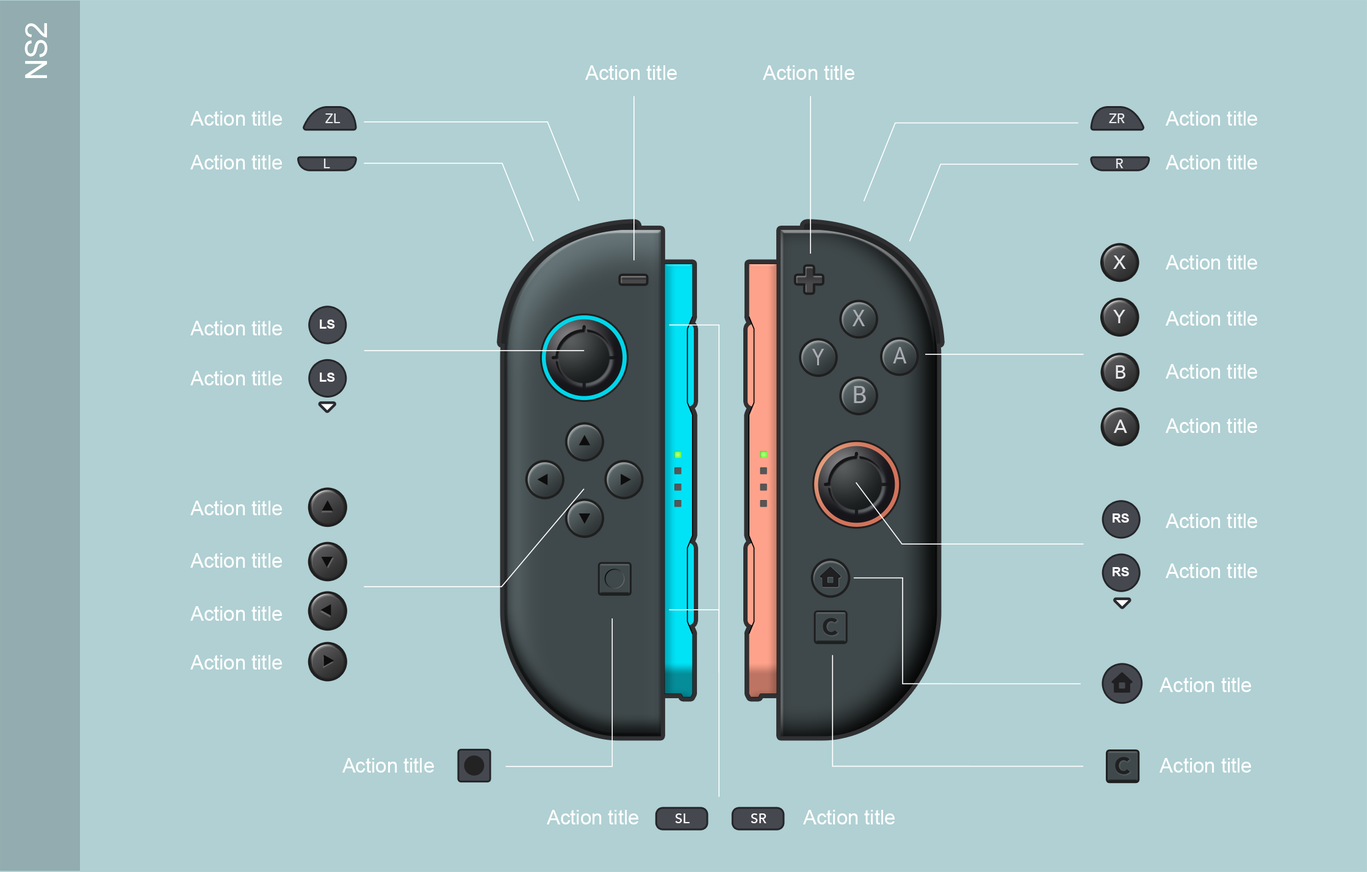
<style>
.page{position:relative;width:1367px;height:872px;background:#b0d0d3}
.page>*{position:absolute;margin:0}
.t1{font:30.5px "ArialMT";color:#ffffff}
.t2{font:20px "ArialMT";color:#ffffff}
.t3{font:13.3px "Avenir-Medium";color:#e7e9eb}
.t4{font:18.9px "Avenir-Medium";color:#e7e9eb}
.t5{font:22.8px "Avenir-Medium";color:#aaadb3;scale:0.83 1}
.t6{font:12.8px "Arial-BoldMT";color:#ffffff}
.t7{font:22.8px "Avenir-Medium";color:#aaadb3;scale:1.04 1}
.t8{font:23.3px "Avenir-Black";letter-spacing:0.01em;color:#202022}
.t9{font:13.6px "Avenir-Medium";color:#ffffff}
</style>
<div class="page">
<p class="t1" style="left:24px;top:23px;width:24px;height:55px;rotate:-90deg">NS2</p>
<p class="t2" style="left:585px;top:65px;width:92px;height:15px">Action title</p>
<p class="t2" style="left:763px;top:65px;width:91px;height:15px">Action title</p>
<p class="t2" style="left:190px;top:111px;width:92px;height:15px">Action title</p>
<p class="t3" style="left:325px;top:113px;width:15px;height:10px">ZL</p>
<p class="t3" style="left:1109px;top:113px;width:15px;height:10px">ZR</p>
<p class="t2" style="left:1165px;top:111px;width:92px;height:15px">Action title</p>
<p class="t2" style="left:190px;top:155px;width:92px;height:15px">Action title</p>
<p class="t3" style="left:323px;top:159px;width:7px;height:9px">L</p>
<p class="t3" style="left:1116px;top:159px;width:7px;height:9px">R</p>
<p class="t2" style="left:1165px;top:155px;width:92px;height:15px">Action title</p>
<p class="t4" style="left:1113px;top:256px;width:13px;height:13px">X</p>
<p class="t2" style="left:1165px;top:255px;width:92px;height:15px">Action title</p>
<p class="t5" style="left:852px;top:310px;width:13px;height:16px">X</p>
<p class="t4" style="left:1113px;top:310px;width:12px;height:13px">Y</p>
<p class="t2" style="left:1165px;top:311px;width:92px;height:15px">Action title</p>
<p class="t2" style="left:190px;top:321px;width:92px;height:15px">Action title</p>
<p class="t6" style="left:320px;top:320px;width:15px;height:9px">LS</p>
<p class="t5" style="left:811px;top:349px;width:13px;height:16px">Y</p>
<p class="t5" style="left:893px;top:347px;width:14px;height:17px">A</p>
<p class="t4" style="left:1115px;top:365px;width:11px;height:14px">B</p>
<p class="t2" style="left:1165px;top:364px;width:92px;height:15px">Action title</p>
<p class="t2" style="left:190px;top:371px;width:92px;height:15px">Action title</p>
<p class="t6" style="left:320px;top:373px;width:15px;height:9px">LS</p>
<p class="t7" style="left:854px;top:386px;width:12px;height:17px">B</p>
<p class="t4" style="left:1113px;top:420px;width:14px;height:13px">A</p>
<p class="t2" style="left:1165px;top:419px;width:92px;height:14px">Action title</p>
<p class="t2" style="left:190px;top:501px;width:92px;height:15px">Action title</p>
<p class="t6" style="left:1112px;top:514px;width:17px;height:9px">RS</p>
<p class="t2" style="left:1165px;top:514px;width:92px;height:14px">Action title</p>
<p class="t2" style="left:190px;top:553px;width:92px;height:15px">Action title</p>
<p class="t6" style="left:1112px;top:567px;width:17px;height:10px">RS</p>
<p class="t2" style="left:1165px;top:564px;width:92px;height:14px">Action title</p>
<p class="t2" style="left:190px;top:606px;width:92px;height:15px">Action title</p>
<p class="t8" style="left:822px;top:618px;width:16px;height:18px">C</p>
<p class="t2" style="left:190px;top:655px;width:92px;height:15px">Action title</p>
<p class="t2" style="left:1159px;top:678px;width:92px;height:15px">Action title</p>
<p class="t2" style="left:342px;top:758px;width:92px;height:15px">Action title</p>
<p class="t8" style="left:1115px;top:757px;width:15px;height:18px">C</p>
<p class="t2" style="left:1159px;top:758px;width:92px;height:15px">Action title</p>
<p class="t2" style="left:547px;top:810px;width:91px;height:15px">Action title</p>
<p class="t9" style="left:675px;top:814px;width:14px;height:10px">SL</p>
<p class="t9" style="left:750px;top:814px;width:16px;height:10px">SR</p>
<p class="t2" style="left:803px;top:810px;width:91px;height:15px">Action title</p>
</div>
